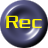
<style>
.page{position:relative;width:48px;height:48px}
.page>*{position:absolute;margin:0}
.t1{font:18.5px "TrSahDungeon-Regular";color:#fff600}
</style>
<div class="page">
<p class="t1" style="left:6px;top:15px;width:36px;height:13px">Rec</p>
</div>
